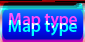
<style>
.page{position:relative;width:85px;height:42px}
.page>*{position:absolute;margin:0}
.t1{font:17.3px "MyriadPro-Semibold"}
</style>
<div class="page">
<p class="t1" style="left:8px;top:13px;width:69px;height:16px">Map type</p>
</div>
